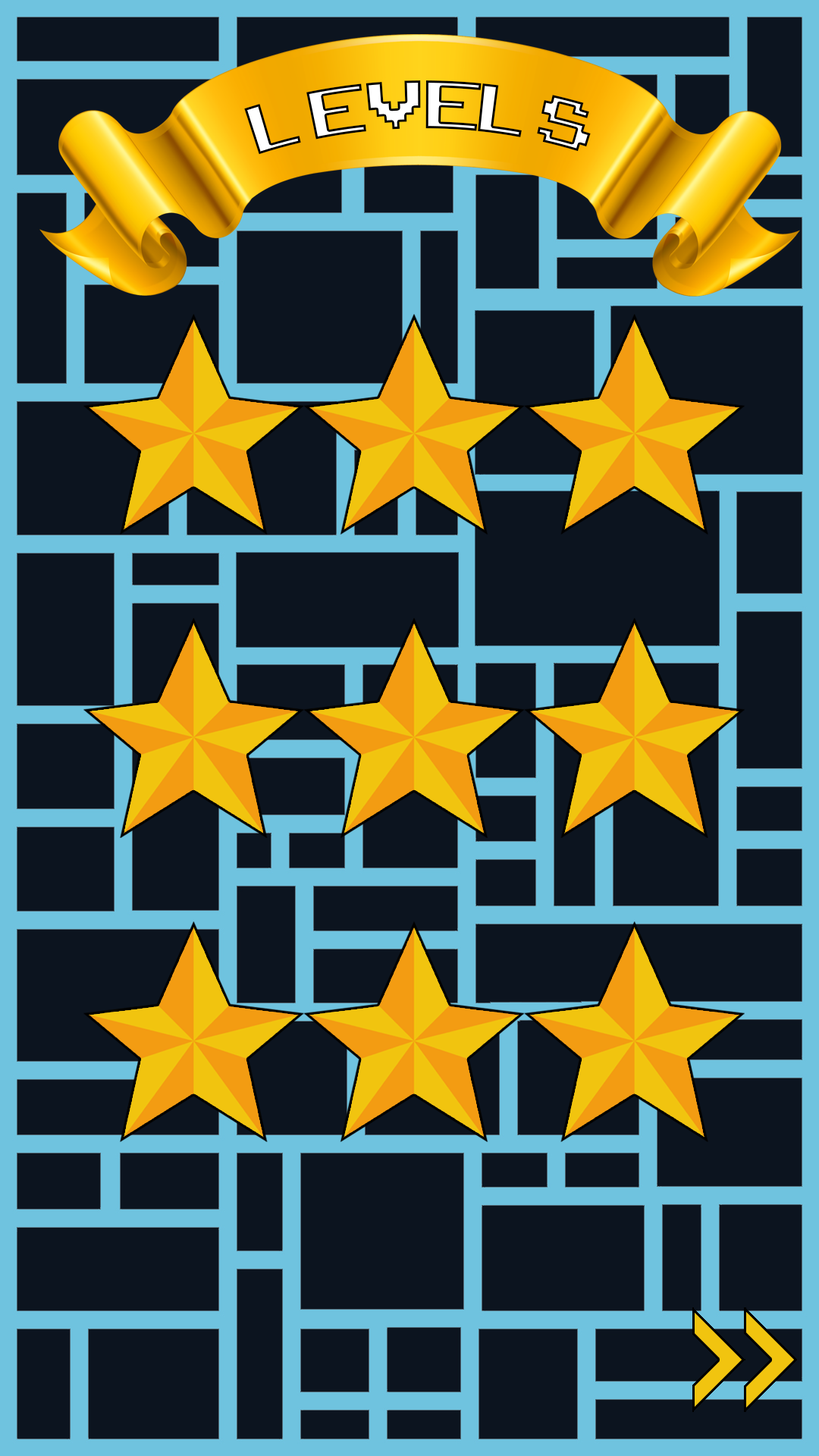
<style>
.page{position:relative;width:819px;height:1456px;background:#0c141f}
.page>*{position:absolute;margin:0}
.t1{font:94.8px "ArcadeClassic"}
</style>
<div class="page">
<p class="t1" style="left:244px;top:80px;width:347px;height:75px">Levels</p>
</div>
